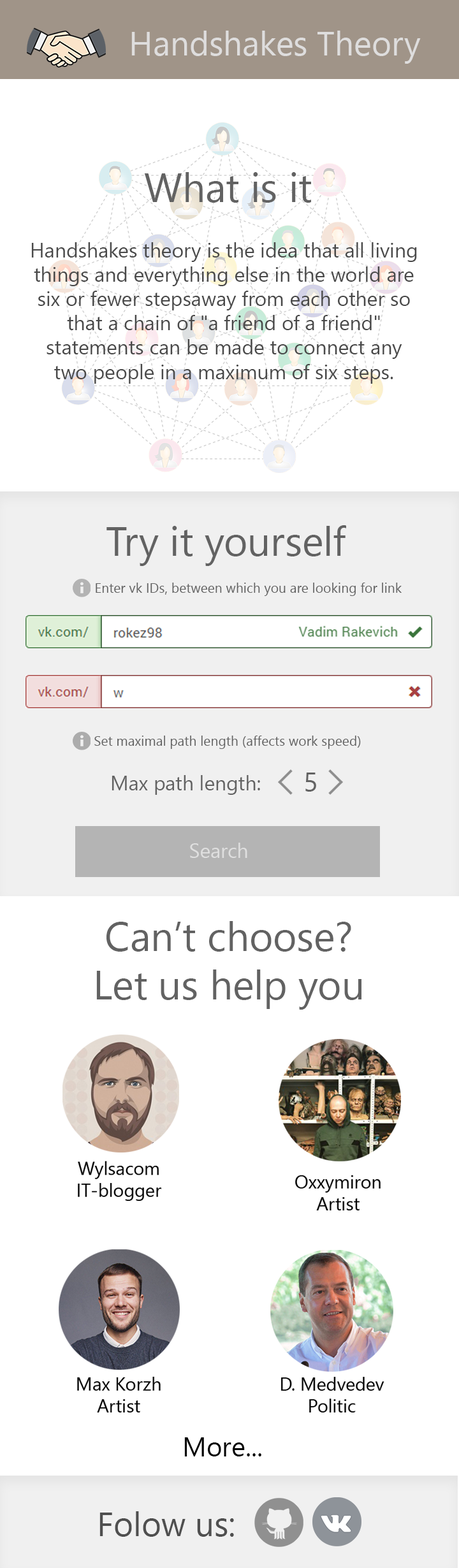
<style>
.page{position:relative;width:459px;height:1568px;background:#ffffff}
.page>*{position:absolute;margin:0}
.t1{font:33.7px "SegoeUI";color:#dedddd}
.t2{font:40.5px "SegoeUI";color:#626262}
.t3{font:20.2px "SegoeUI";color:#494949}
.t4{font:13.5px "SegoeUI";color:#626262}
.t5{font:27px "SegoeUI";color:#626262}
.t6{font:20.2px "SegoeUI";color:#626262}
.t7{font:20.2px "SegoeUI";color:#dfdfdf}
.t8{font:27px "SegoeUI";color:#000000}
.t9{font:33.7px "SegoeUI";color:#4f4f4f}
</style>
<div class="page">
<p class="t1" style="left:131px;top:31px;width:290px;height:33px">Handshakes Theory</p>
<p class="t2" style="left:144px;top:172px;width:167px;height:31px">What is it</p>
<p class="t3" style="left:31px;top:242px;width:386px;height:142px;text-align:center">Handshakes theory is the idea that all living things and everything else in the world are six or fewer stepsaway from each other so that a chain of "a friend of a friend" statements can be made to connect any two people in a maximum of six steps.</p>
<p class="t2" style="left:106px;top:525px;width:240px;height:41px">Try it yourself</p>
<p class="t4" style="left:96px;top:583px;width:306px;height:13px">Enter vk IDs, between which you are looking for link</p>
<p class="t4" style="left:94px;top:736px;width:267px;height:13px">Set maximal path length (affects work speed)</p>
<p class="t5" style="left:305px;top:773px;width:11px;height:19px">5</p>
<p class="t6" style="left:112px;top:775px;width:148px;height:20px">Max path length:</p>
<p class="t7" style="left:190px;top:843px;width:57px;height:15px">Search</p>
<p class="t2" style="left:96px;top:921px;width:265px;height:89px;text-align:center">Can’t choose?<br>Let us help you</p>
<p class="t8" style="left:184px;top:1437px;width:77px;height:19px">More...</p>
<p class="t9" style="left:99px;top:1511px;width:135px;height:26px">Folow us:</p>
</div>
